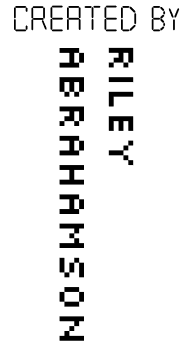
<style>
.page{position:relative;width:192px;height:350px;background:#ffffff}
.page>*{position:absolute;margin:0}
.t1{font:40px "Calculator";color:#000000}
.t2{font:41px "Silkscreen";color:#000000}
</style>
<div class="page">
<p class="t1" style="left:13px;top:5px;width:167px;height:27px">CREATED BY</p>
<p class="t2" style="left:59px;top:47px;width:75px;height:294px;rotate:90deg">riley<br>abrahamson</p>
</div>
